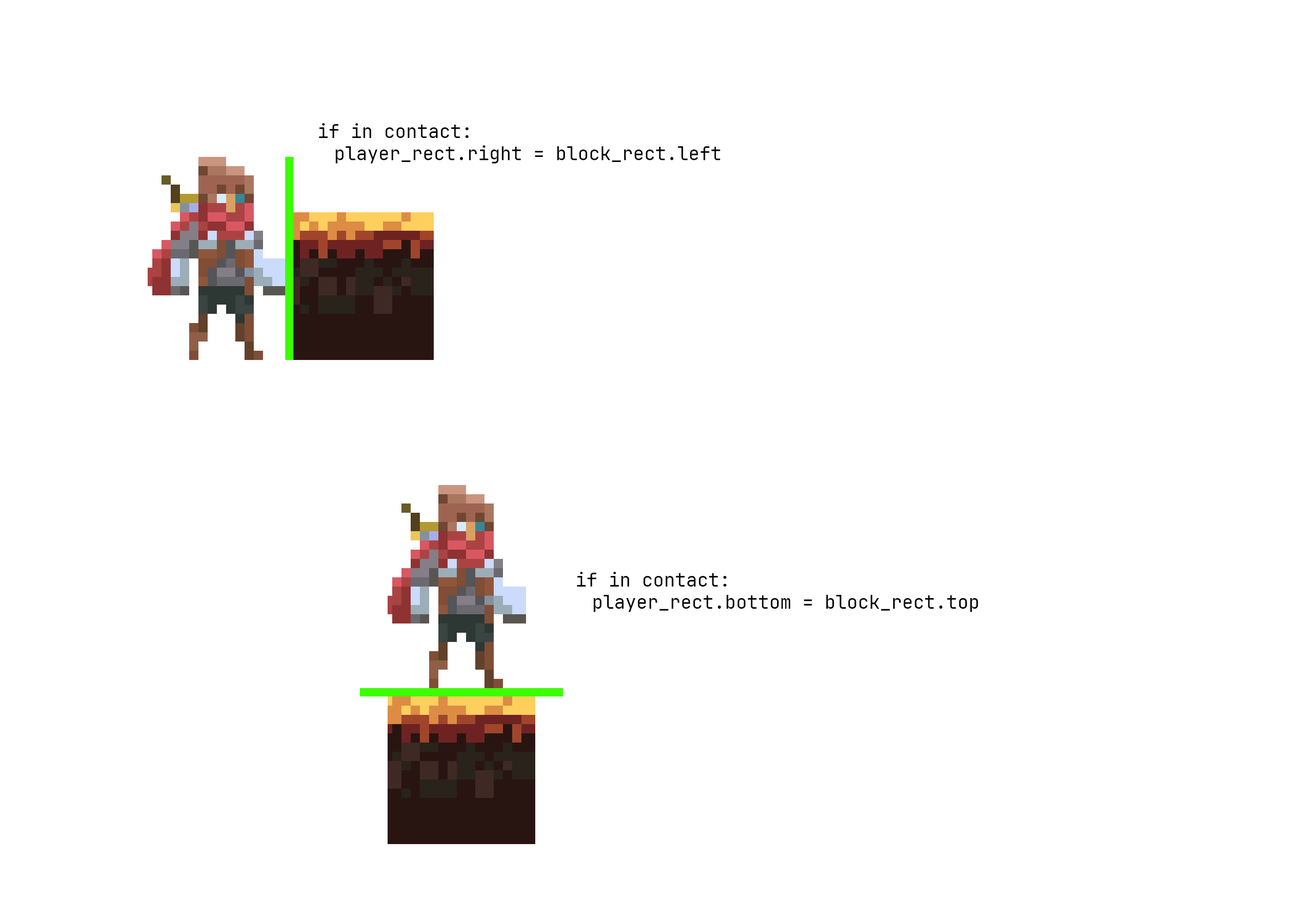
<style>
.page{position:relative;width:1292px;height:923px;background:#ffffff}
.page>*{position:absolute;margin:0}
.t1{font:18.5px "JetBrainsMonoNL-Regular";color:#000000}
</style>
<div class="page">
<p class="t1" style="left:319px;top:123px;width:401px;height:40px">if in contact:<br> player_rect.right = block_rect.left</p>
<p class="t1" style="left:577px;top:572px;width:401px;height:40px">if in contact:<br> player_rect.bottom = block_rect.top</p>
</div>
